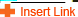
<style>
.page{position:relative;width:78px;height:17px;background:#ffffff}
.page>*{position:absolute;margin:0}
.t1{font:12px "ArialMT"}
</style>
<div class="page">
<p class="t1" style="left:21px;top:4px;width:55px;height:9px">Insert Link</p>
</div>
